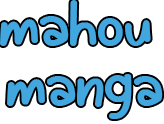
<style>
.page{position:relative;width:164px;height:124px;background:#ffffff}
.page>*{position:absolute;margin:0}
.t1{font:62.4px/60px "SummerDays-Regular";color:#42a6df;scale:1.05 1}
</style>
<div class="page">
<p class="t1" style="left:0px;top:0px;width:163px;height:119px;text-align:center">mahou <br>manga</p>
</div>
